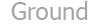
<style>
.page{position:relative;width:92px;height:24px;background:#ffffff}
.page>*{position:absolute;margin:0}
.t1{font:24px "Tahoma";color:#a5a6a9}
</style>
<div class="page">
<p class="t1" style="left:11px;top:1px;width:77px;height:19px">Ground</p>
</div>
